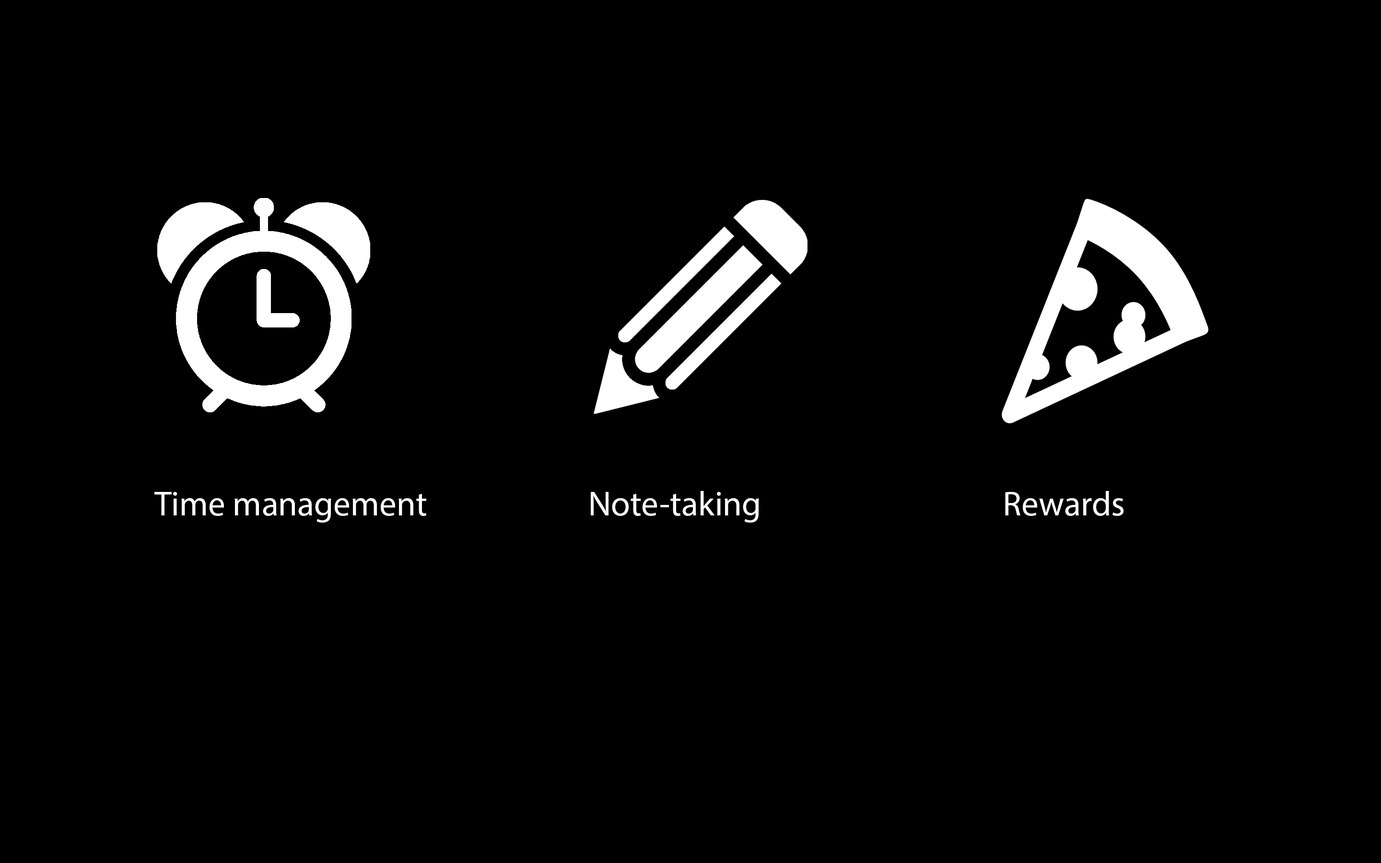
<style>
.page{position:relative;width:1381px;height:863px;background:#000000}
.page>*{position:absolute;margin:0}
.t1{font:34.5px "MyriadPro-Regular";color:#ffffff}
</style>
<div class="page">
<p class="t1" style="left:154px;top:491px;width:970px;height:32px">Time management                      Note-taking                                 Rewards</p>
</div>
